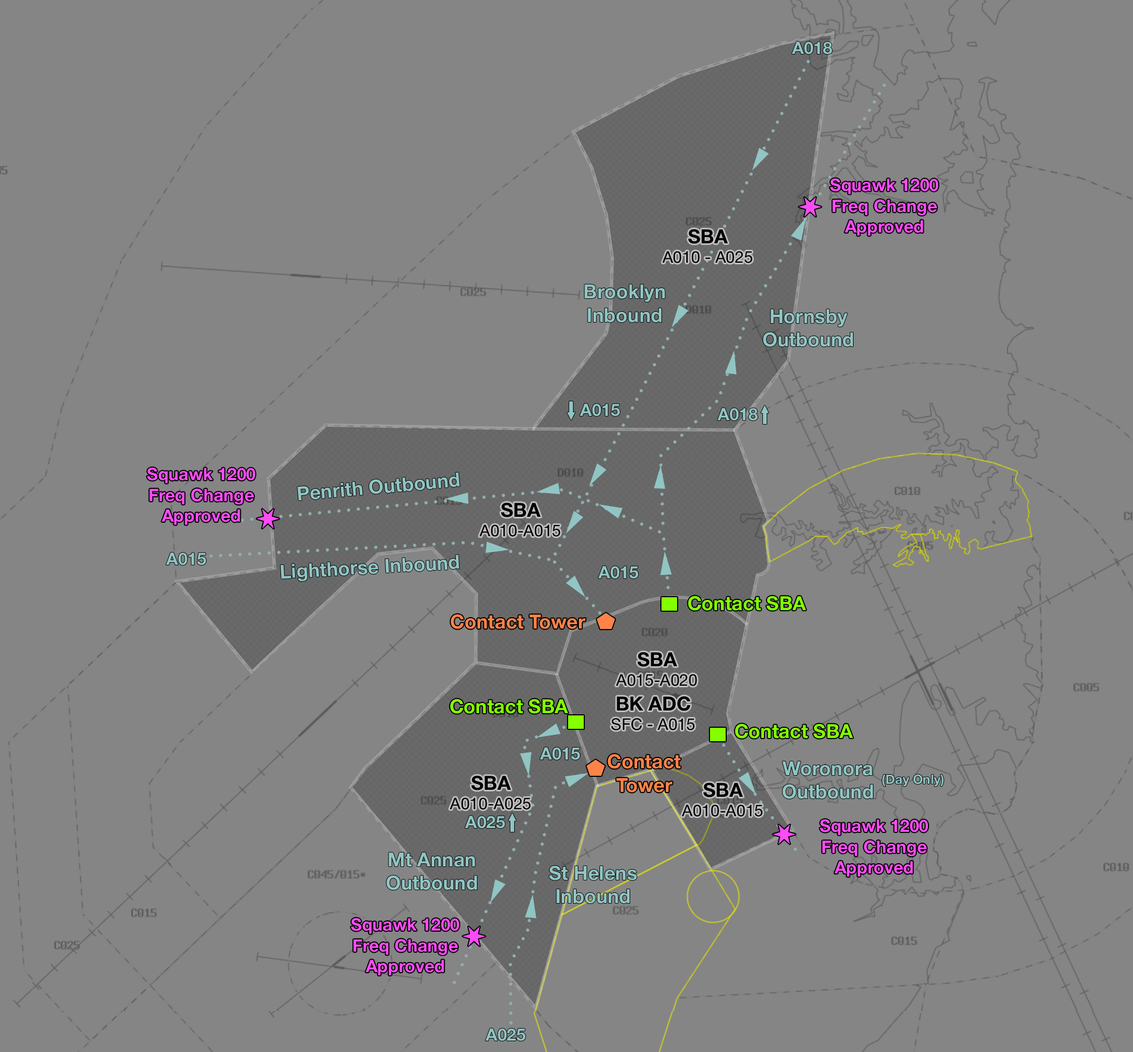
<style>
.page{position:relative;width:1133px;height:1052px;background:#858585}
.page>*{position:absolute;margin:0}
.t1{font:17.3px "HelveticaNeue-Bold";color:#90c5c3}
.t2{font:17.3px "HelveticaNeue-Bold";color:#fe4bf8}
.t3{font:16.2px "HelveticaNeue-Roman";color:#000000}
.t4{font:19.4px "HelveticaNeue-Bold";color:#000000}
.t5{font:19.4px "HelveticaNeue-Bold";color:#90c5c3}
.t6{font:19.4px "HelveticaNeue-Bold";color:#84ff00}
.t7{font:19.4px "HelveticaNeue-Bold";color:#fe8349}
.t8{font:13px "HelveticaNeue-Bold";color:#90c5c3}
</style>
<div class="page">
<p class="t1" style="left:792px;top:42px;width:41px;height:13px">A018</p>
<p class="t2" style="left:830px;top:178px;width:108px;height:58px;text-align:center">Squawk 1200<br>Freq Change<br>Approved</p>
<p class="t3" style="left:662px;top:229px;width:91px;height:34px;text-align:center"><span class="t4">SBA<br></span>A010 - A025</p>
<p class="t5" style="left:584px;top:284px;width:81px;height:39px;text-align:center">Brooklyn<br>Inbound</p>
<p class="t5" style="left:763px;top:309px;width:90px;height:38px;text-align:center">Hornsby<br>Outbound</p>
<p class="t1" style="left:580px;top:404px;width:40px;height:13px">A015</p>
<p class="t1" style="left:717px;top:408px;width:41px;height:13px">A018</p>
<p class="t2" style="left:147px;top:467px;width:108px;height:58px;text-align:center">Squawk 1200<br>Freq Change<br>Approved</p>
<p class="t5" style="left:297px;top:472px;width:163px;height:29px;rotate:-5deg">Penrith Outbound</p>
<p class="t3" style="left:479px;top:502px;width:82px;height:35px;text-align:center"><span class="t4">SBA<br></span>A010-A015</p>
<p class="t1" style="left:166px;top:553px;width:40px;height:13px">A015</p>
<p class="t5" style="left:281px;top:555px;width:178px;height:27px;rotate:-3deg">Lighthorse Inbound</p>
<p class="t1" style="left:598px;top:566px;width:40px;height:13px">A015</p>
<p class="t6" style="left:688px;top:596px;width:118px;height:15px">Contact SBA</p>
<p class="t7" style="left:451px;top:614px;width:134px;height:15px">Contact Tower</p>
<p class="t3" style="left:616px;top:652px;width:81px;height:34px;text-align:center"><span class="t4">SBA<br></span>A015-A020</p>
<p class="t6" style="left:450px;top:699px;width:118px;height:15px">Contact SBA</p>
<p class="t3" style="left:611px;top:696px;width:84px;height:35px;text-align:center"><span class="t4">BK ADC<br></span>SFC - A015</p>
<p class="t6" style="left:735px;top:724px;width:118px;height:15px">Contact SBA</p>
<p class="t1" style="left:540px;top:747px;width:40px;height:13px">A015</p>
<p class="t7" style="left:608px;top:754px;width:73px;height:39px;text-align:center">Contact<br>Tower</p>
<p class="t5" style="left:782px;top:761px;width:91px;height:38px;text-align:center">Woronora<br>Outbound</p>
<p class="t3" style="left:450px;top:775px;width:81px;height:35px;text-align:center"><span class="t4">SBA</span><br>A010-A025</p>
<p class="t3" style="left:682px;top:782px;width:81px;height:35px;text-align:center"><span class="t4">SBA<br></span>A010-A015</p>
<p class="t8" style="left:882px;top:774px;width:62px;height:13px">(Day Only)</p>
<p class="t1" style="left:465px;top:816px;width:40px;height:13px">A025</p>
<p class="t2" style="left:820px;top:819px;width:108px;height:58px;text-align:center">Squawk 1200<br>Freq Change<br>Approved</p>
<p class="t5" style="left:386px;top:853px;width:91px;height:37px;text-align:center">Mt Annan<br>Outbound</p>
<p class="t5" style="left:549px;top:866px;width:88px;height:38px;text-align:center">St Helens<br>Inbound</p>
<p class="t2" style="left:351px;top:918px;width:108px;height:58px;text-align:center">Squawk 1200<br>Freq Change<br>Approved</p>
<p class="t1" style="left:485px;top:1029px;width:41px;height:12px">A025</p>
</div>
